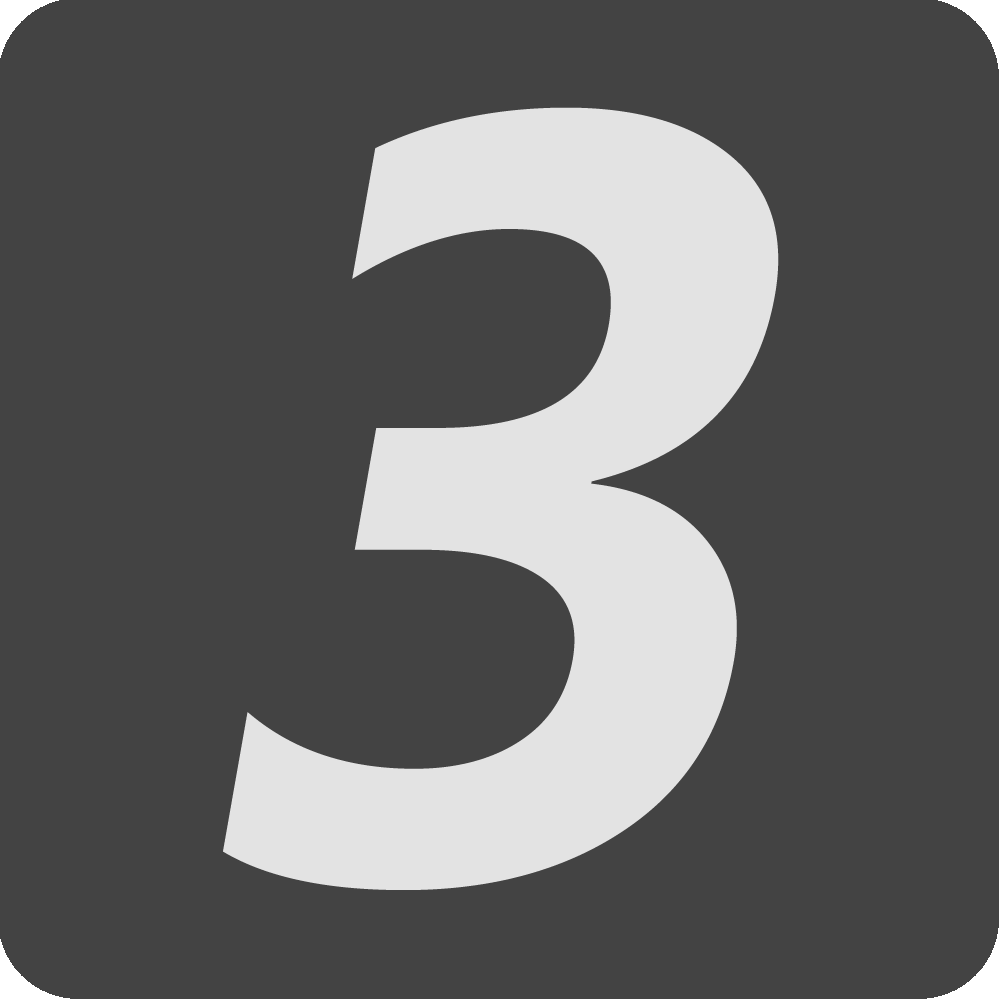
<style>
.page{position:relative;width:1000px;height:1000px;background:#434343}
.page>*{position:absolute;margin:0}
.t1{font:1000px "MicrosoftYaHei-Bold";color:#e3e3e3;text-transform:uppercase;font-style:italic}
</style>
<div class="page">
<p class="t1" style="left:223px;top:107px;width:556px;height:783px">3</p>
</div>
